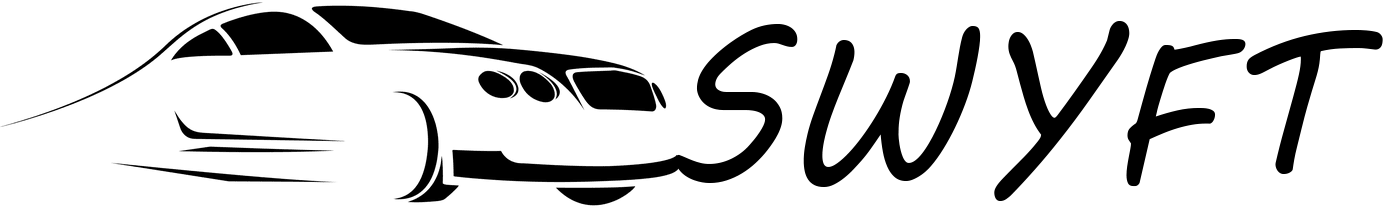
<style>
.page{position:relative;width:1383px;height:208px;background:#ffffff}
.page>*{position:absolute;margin:0}
.t1{font:200px "MVBoli";color:#000000}
</style>
<div class="page">
<p class="t1" style="left:675px;top:21px;width:708px;height:180px">SWYFT</p>
</div>
